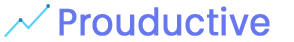
<style>
.page{position:relative;width:294px;height:42px;background:#ffffff}
.page>*{position:absolute;margin:0}
.t1{font:37.5px "Poppins-Regular";letter-spacing:0.005em;color:#6777ef;font-weight:bold;scale:0.91 1}
</style>
<div class="page">
<p class="t1" style="left:59px;top:6px;width:211px;height:30px">Prouductive</p>
</div>
